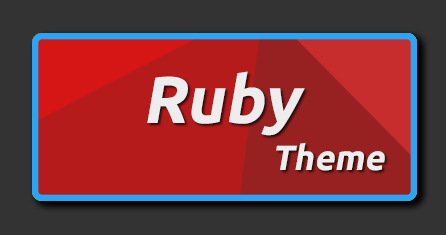
<style>
.page{position:relative;width:446px;height:235px;background:#333333}
.page>*{position:absolute;margin:0}
.t1{font:66.2px "Ubuntu-Bold";color:#ededed;font-style:italic}
.t2{font:35px "Ubuntu-Bold";color:#ededed;font-style:italic}
</style>
<div class="page">
<p class="t1" style="left:147px;top:71px;width:158px;height:65px">Ruby</p>
<p class="t2" style="left:276px;top:142px;width:109px;height:29px">Theme</p>
</div>
